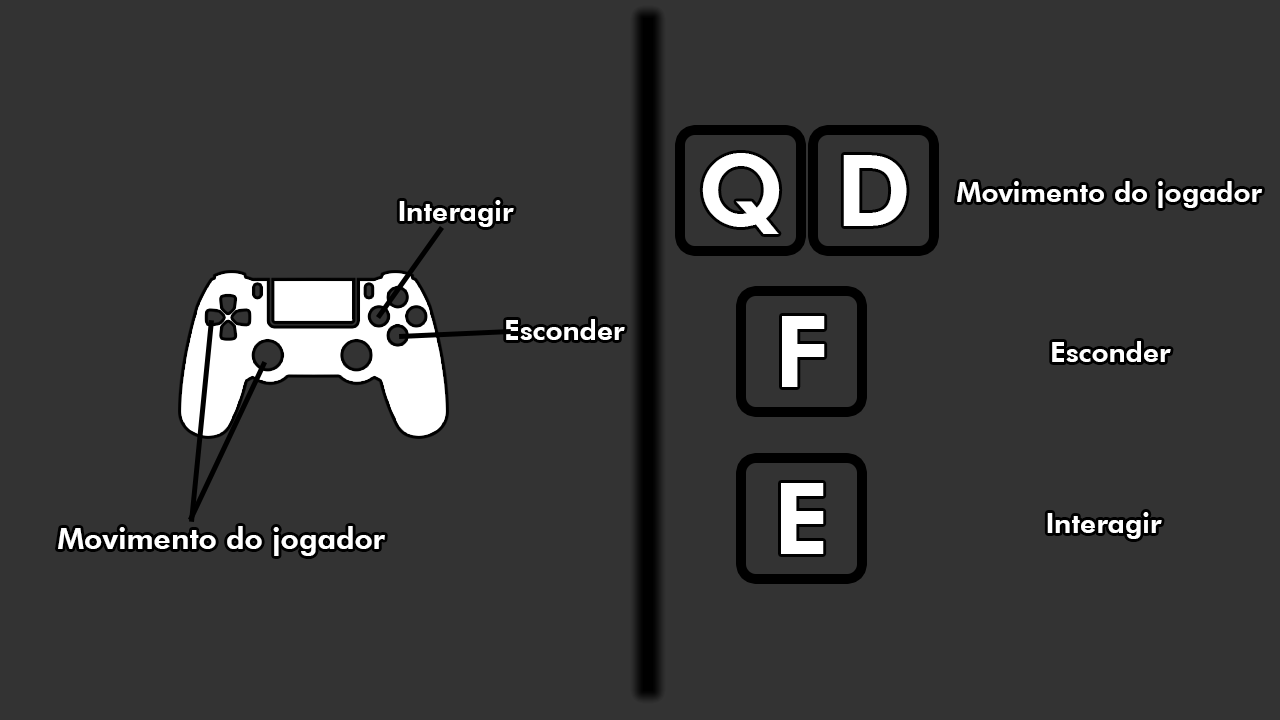
<style>
.page{position:relative;width:1280px;height:720px;background:#333333}
.page>*{position:absolute;margin:0}
.t1{font:100px "FuturaBT-Heavy";color:#ffffff}
.t2{font:28px "FuturaBT-Heavy";color:#ffffff}
.t3{font:30px "FuturaBT-Heavy";color:#ffffff}
</style>
<div class="page">
<p class="t1" style="left:702px;top:153px;width:78px;height:81px">Q</p>
<p class="t1" style="left:843px;top:155px;width:64px;height:71px">D</p>
<p class="t2" style="left:957px;top:181px;width:305px;height:27px">Movimento do jogador</p>
<p class="t2" style="left:399px;top:200px;width:115px;height:27px">Interagir</p>
<p class="t1" style="left:782px;top:316px;width:43px;height:71px">F</p>
<p class="t2" style="left:506px;top:319px;width:119px;height:21px">Esconder</p>
<p class="t2" style="left:1052px;top:341px;width:119px;height:21px">Esconder</p>
<p class="t1" style="left:781px;top:483px;width:43px;height:71px">E</p>
<p class="t2" style="left:1047px;top:512px;width:115px;height:27px">Interagir</p>
<p class="t3" style="left:58px;top:526px;width:327px;height:30px">Movimento do jogador</p>
</div>
